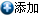
<style>
.page{position:relative;width:39px;height:17px;background:#ffffff}
.page>*{position:absolute;margin:0}
.t1{font:12px "SimSun";color:#000000}
</style>
<div class="page">
<p class="t1" style="left:15px;top:2px;width:23px;height:11px">添加</p>
</div>
